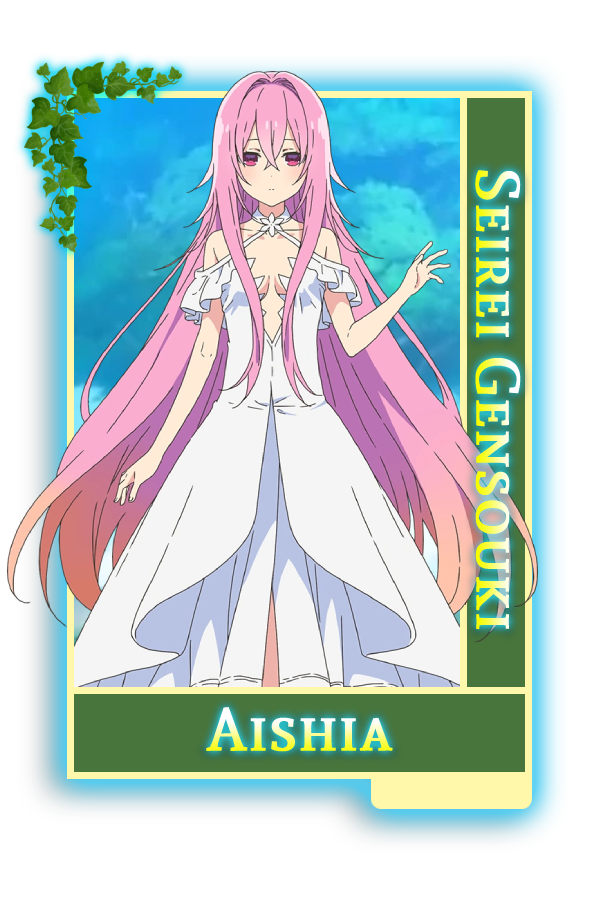
<style>
.page{position:relative;width:600px;height:900px}
.page>*{position:absolute;margin:0}
.t1{font:61px "AndadaSC-Regular";font-weight:bold}
</style>
<div class="page">
<p class="t1" style="left:475px;top:170px;width:46px;height:460px;rotate:90deg">Seirei Gensouki</p>
<p class="t1" style="left:206px;top:707px;width:187px;height:45px">Aishia</p>
</div>
